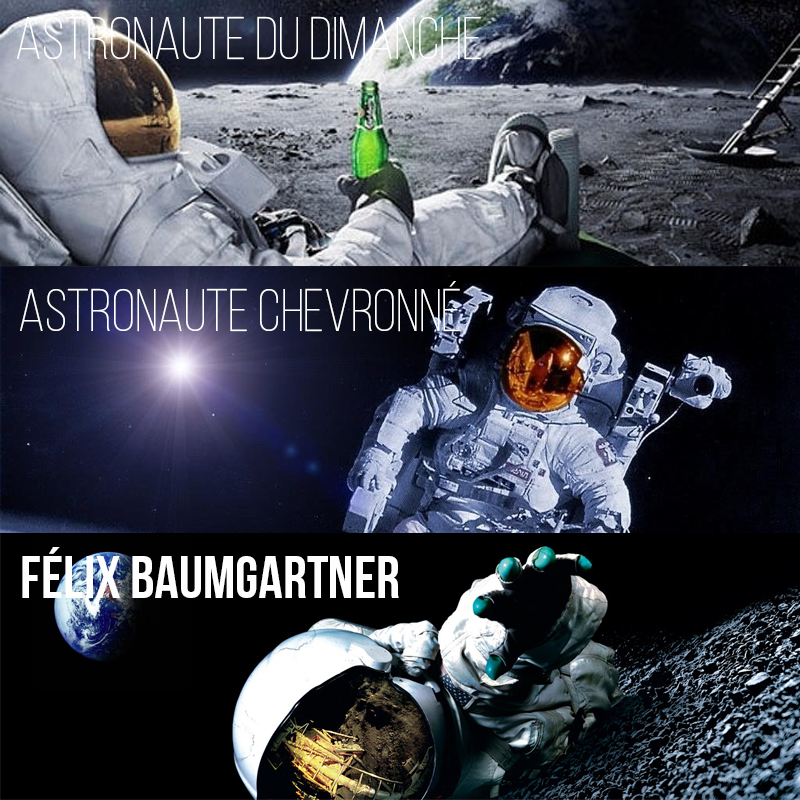
<style>
.page{position:relative;width:800px;height:800px}
.page>*{position:absolute;margin:0}
.t1{font:60px "BebasNeueLight";color:#fefefe}
.t2{font:60px "BebasNeue";color:#fefefe}
</style>
<div class="page">
<p class="t1" style="left:17px;top:16px;width:464px;height:44px">astronaute du dimanche</p>
<p class="t1" style="left:20px;top:281px;width:440px;height:51px">astronaute chevronné</p>
<p class="t2" style="left:22px;top:547px;width:377px;height:51px">félix baumgartner</p>
</div>
